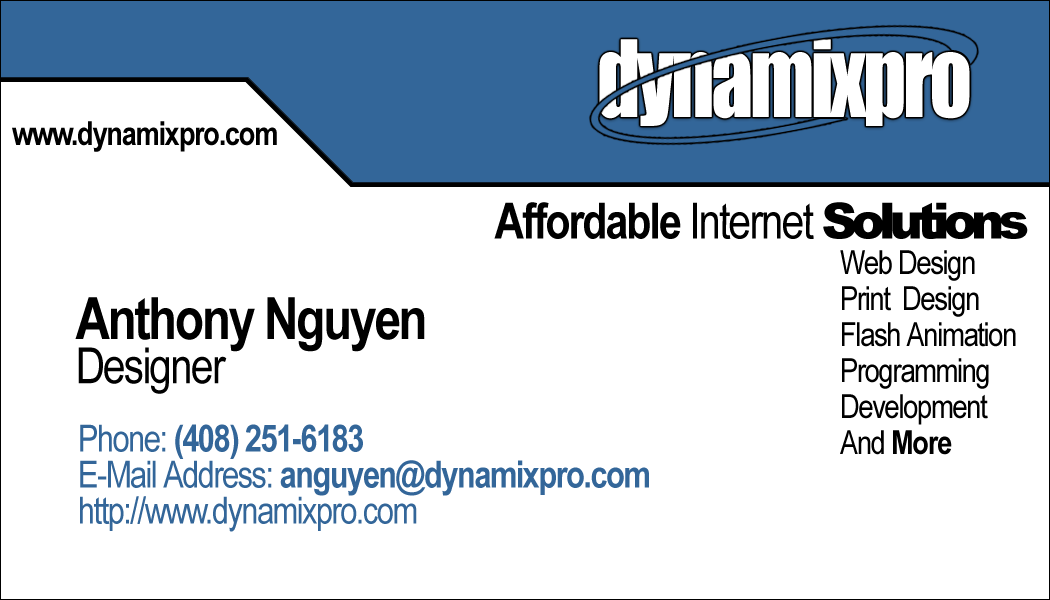
<style>
.page{position:relative;width:1050px;height:600px;background:#ffffff}
.page>*{position:absolute;margin:0}
.t1{font:98.5px "Impact";letter-spacing:-0.04em;color:#ffffff;scale:0.85 1}
.t2{font:33.3px "ArialNarrow-Bold";letter-spacing:-0.04em;color:#000000}
.t3{font:50px "ArialNarrow-Bold";letter-spacing:-0.04em;color:#000000}
.t4{font:50px "ArialNarrow";letter-spacing:-0.04em;color:#000000}
.t5{font:50px "Arial-Black";letter-spacing:-0.12em;color:#000000}
.t6{font:33.3px/36px "ArialNarrow";letter-spacing:-0.04em;color:#000000}
.t7{font:33.3px/44.4px "ArialNarrow";letter-spacing:-0.04em;color:#000000}
.t8{font:33.3px/36px "ArialNarrow-Bold";letter-spacing:-0.04em;color:#000000}
.t9{font:58.3px/44.4px "ArialNarrow-Bold";letter-spacing:-0.04em;color:#000000}
.t10{font:50px/44.4px "ArialNarrow";letter-spacing:-0.04em;color:#000000}
.t11{font:37.5px/36px "ArialNarrow";letter-spacing:-0.04em;color:#336699}
.t12{font:37.5px/36px "ArialNarrow-Bold";letter-spacing:-0.04em;color:#336699}
</style>
<div class="page">
<p class="t1" style="left:599px;top:39px;width:371px;height:87px">dynamixpro</p>
<p class="t2" style="left:12px;top:121px;width:265px;height:31px">www.dynamixpro.com</p>
<p class="t3" style="left:494px;top:202px;width:534px;height:37px">Affordable <span class="t4">Internet </span><span class="t5">Solutions</span></p>
<p class="t6" style="left:840px;top:250px;width:176px;height:205px"><span class="t7">Web Design<br></span>Print  Design<br>Flash Animation<br>Programming<br>Development<br>And <span class="t8">More</span></p>
<p class="t9" style="left:75px;top:297px;width:350px;height:97px">Anthony Nguyen<br><span class="t10">Designer</span></p>
<p class="t11" style="left:80px;top:424px;width:569px;height:108px">Phone: <span class="t12">(408) 251-6183<br></span>E-Mail Address: <span class="t12">anguyen@dynamixpro.com<br></span>http://www.dynamixpro.com</p>
</div>
